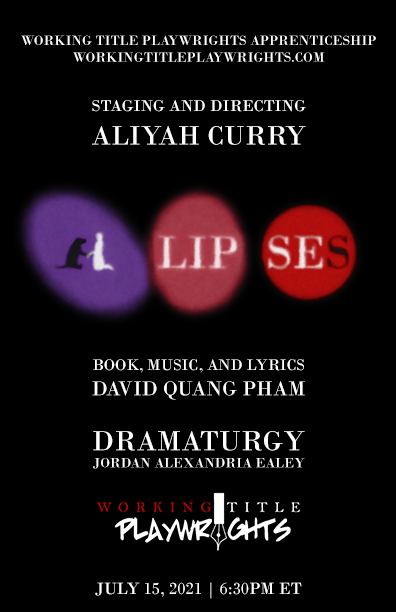
<style>
.page{position:relative;width:396px;height:612px;background:#000000}
.page>*{position:absolute;margin:0}
.t1{font:14px "BodoniMT";color:#ffffff}
.t2{font:16.6px "BodoniMT";color:#ffffff}
.t3{font:27.8px "BodoniMT";color:#ffffff}
.t4{font:16px "BodoniMT";color:#ffffff}
.t5{font:21px "BodoniMT";color:#ffffff}
.t6{font:29px "BodoniMT";color:#ffffff}
.t7{font:17px "BodoniMT";color:#ffffff}
</style>
<div class="page">
<p class="t1" style="left:21px;top:35px;width:355px;height:27px;text-align:center">WORKING TITLE PLAYWRIGHTS APPRENTICESHIP<br>WORKINGTITLEPLAYWRIGHTS.COM</p>
<p class="t2" style="left:92px;top:100px;width:214px;height:45px;text-align:center">STAGING AND DIRECTING<br><span class="t3">ALIYAH CURRY</span></p>
<p class="t4" style="left:92px;top:359px;width:213px;height:41px;text-align:center">BOOK, MUSIC, AND LYRICS<br><span class="t5">DAVID QUANG PHAM</span></p>
<p class="t1" style="left:93px;top:431px;width:212px;height:38px;text-align:center"><span class="t6">DRAMATURGY<br></span>JORDAN ALEXANDRIA EALEY</p>
<p class="t7" style="left:95px;top:582px;width:207px;height:17px">JULY 15, 2021 | 6:30PM ET</p>
</div>
